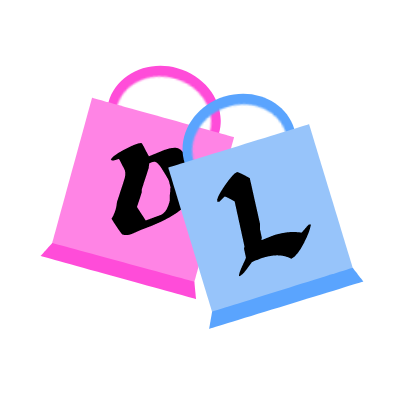
<style>
.page{position:relative;width:400px;height:400px;background:#ffffff}
.page>*{position:absolute;margin:0}
.t1{font:119px "FloranteatLaura";color:#000000}
</style>
<div class="page">
<p class="t1" style="left:110px;top:143px;width:85px;height:92px;rotate:18deg">D</p>
<p class="t1" style="left:217px;top:172px;width:94px;height:105px;rotate:-12deg">L</p>
</div>
